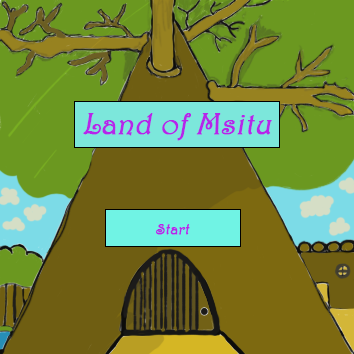
<style>
.page{position:relative;width:354px;height:354px;background:#6b9820}
.page>*{position:absolute;margin:0}
.t1{font:30px "Harrington";color:#b526ea;font-weight:bold;font-style:italic}
.t2{font:15px "Harrington";color:#b526ea;font-weight:bold;font-style:italic}
</style>
<div class="page">
<p class="t1" style="left:83px;top:113px;width:189px;height:28px">Land of Msitu</p>
<p class="t2" style="left:156px;top:224px;width:34px;height:11px">Start</p>
</div>
